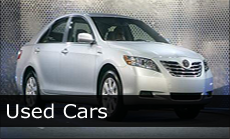
<style>
.page{position:relative;width:230px;height:139px}
.page>*{position:absolute;margin:0}
.t1{font:19px "Verdana";color:#fefefe;scale:1.06 1}
</style>
<div class="page">
<p class="t1" style="left:7px;top:103px;width:100px;height:16px">Used Cars</p>
</div>
